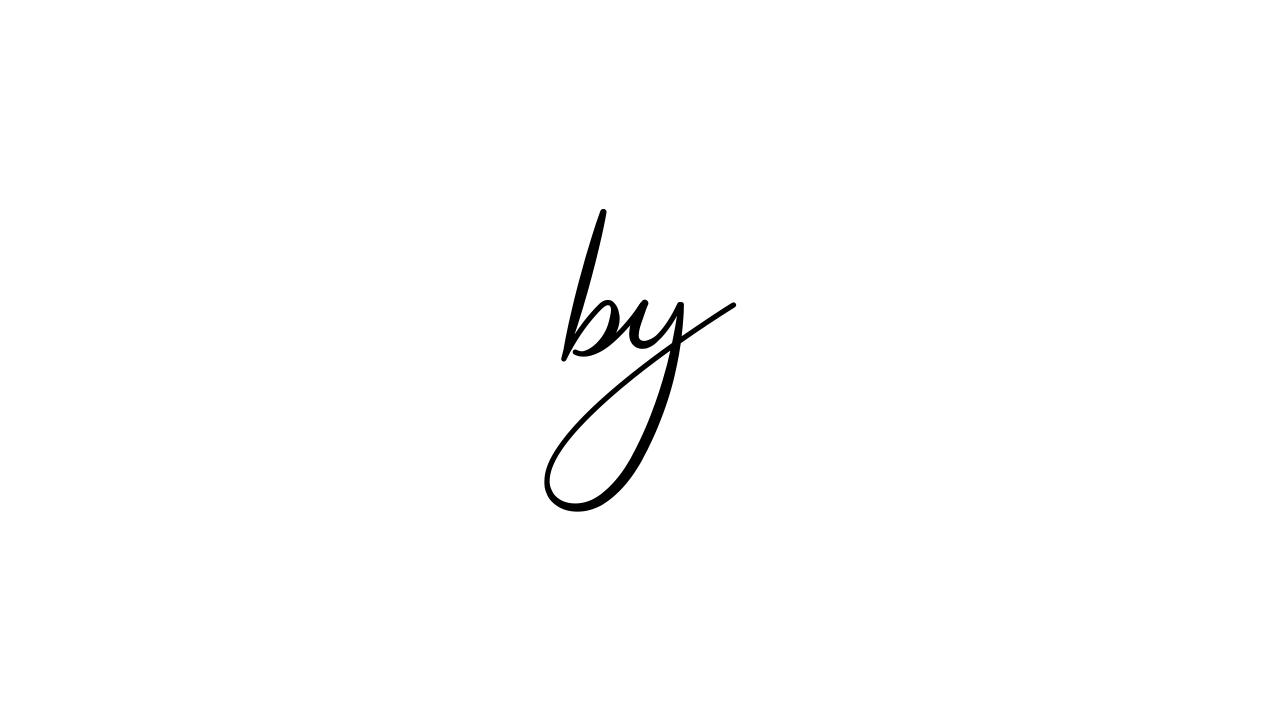
<style>
.page{position:relative;width:1280px;height:720px;background:#ffffff}
.page>*{position:absolute;margin:0}
.t1{font:200px "AmericansClassy";color:#000000}
</style>
<div class="page">
<p class="t1" style="left:544px;top:208px;width:193px;height:304px">by</p>
</div>
